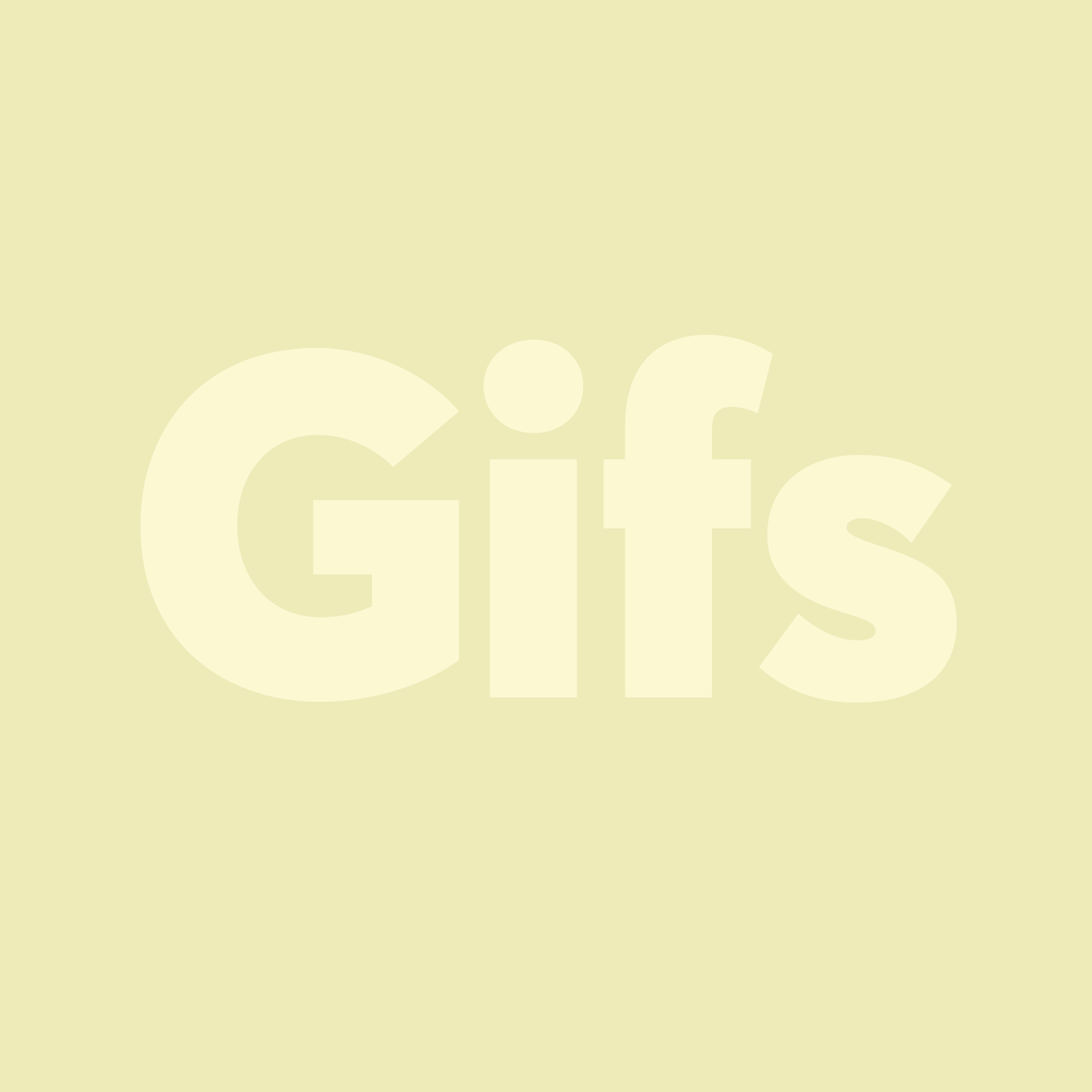
<style>
.page{position:relative;width:1092px;height:1092px;background:#efebb9}
.page>*{position:absolute;margin:0}
.t1{font:485.3px "AvertaStd-Black";letter-spacing:-0.05em;color:#fbf8d2}
.t2{font:485.3px "AvertaStd-Black";letter-spacing:-0.05em;color:#fff9bb}
</style>
<div class="page">
<p class="t1" style="left:141px;top:334px;width:816px;height:369px">Gifs</p>
<p class="t2" style="left:141px;top:334px;width:816px;height:369px;opacity:0.43">Gifs</p>
</div>
